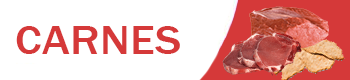
<style>
.page{position:relative;width:350px;height:80px;background:#ffffff}
.page>*{position:absolute;margin:0}
.t1{font:41px "FranklinGothic-Medium";color:#d53939;scale:1.13 1}
</style>
<div class="page">
<p class="t1" style="left:16px;top:26px;width:164px;height:28px">CARNES</p>
</div>
